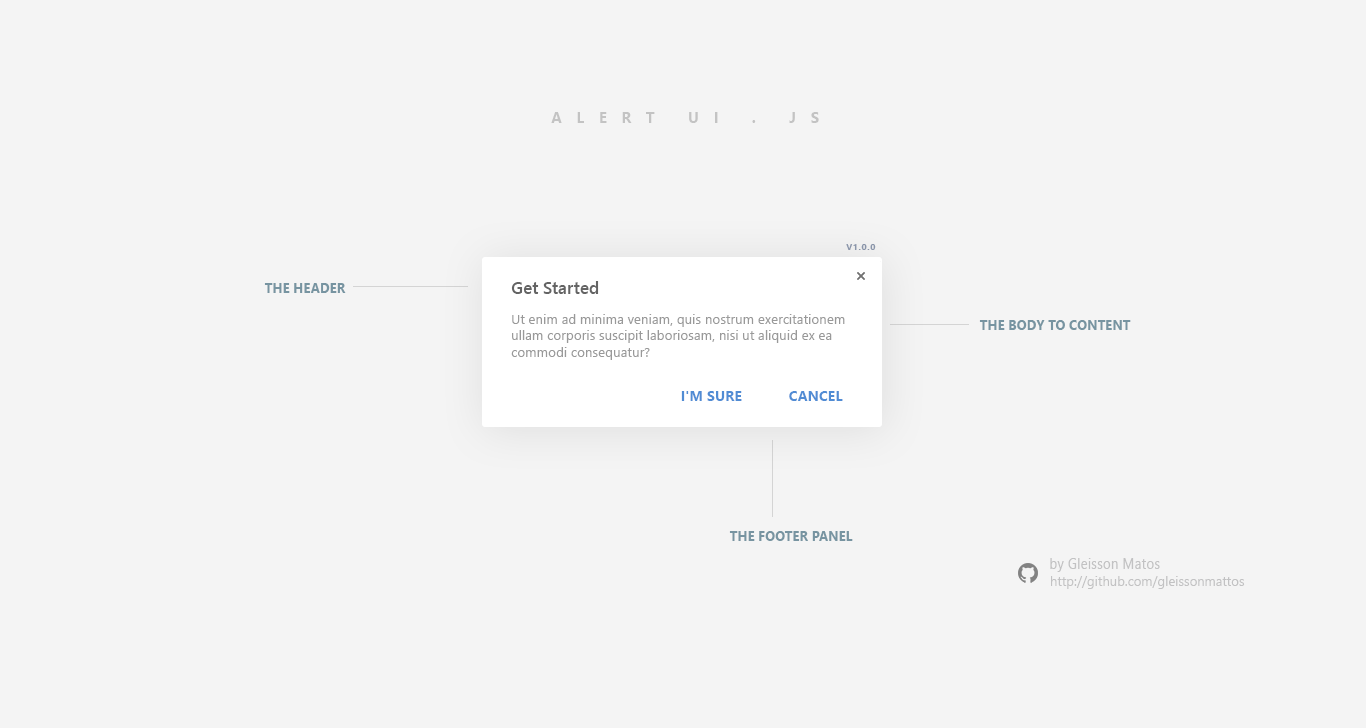
<style>
.page{position:relative;width:1366px;height:728px;background:#f4f4f4}
.page>*{position:absolute;margin:0}
.t1{font:16.4px "SegoeUI-Bold";letter-spacing:0.96em;color:#c2c2c3;text-transform:uppercase;scale:0.92 1}
.t2{font:8.3px "SegoeUI-Bold";letter-spacing:0.06em;color:#8a95aa;text-transform:uppercase;scale:1.08 1}
.t3{font:17.1px "SegoeUI-Semibold";color:#646464}
.t4{font:13.2px "SegoeUI-Bold";color:#7794a1;text-transform:uppercase}
.t5{font:13.4px "SegoeUI";color:#999999}
.t6{font:14.2px "SegoeUI-Bold";color:#518cd4;text-transform:uppercase}
.t7{font:14.6px "SegoeUI";letter-spacing:0.01em;color:#c2c2c3;scale:0.92 1}
.t8{font:13.8px "SegoeUI";letter-spacing:0.01em;color:#c2c2c3;scale:0.92 1}
</style>
<div class="page">
<p class="t1" style="left:551px;top:112px;width:268px;height:11px">alert ui . js</p>
<p class="t2" style="left:846px;top:244px;width:30px;height:6px">V1.0.0</p>
<p class="t3" style="left:511px;top:281px;width:88px;height:13px">Get Started</p>
<p class="t4" style="left:264px;top:283px;width:82px;height:10px">The HEADER</p>
<p class="t5" style="left:511px;top:314px;width:334px;height:46px">Ut enim ad minima veniam, quis nostrum exercitationem ullam corporis suscipit laboriosam, nisi ut aliquid ex ea commodi consequatur?</p>
<p class="t4" style="left:979px;top:320px;width:152px;height:10px">The Body to content</p>
<p class="t6" style="left:681px;top:391px;width:61px;height:10px">I'm sure</p>
<p class="t6" style="left:789px;top:391px;width:54px;height:10px">Cancel</p>
<p class="t4" style="left:729px;top:531px;width:124px;height:10px">The footer panel</p>
<p class="t7" style="left:1050px;top:558px;width:110px;height:14px">by Gleisson Matos</p>
<p class="t8" style="left:1051px;top:576px;width:194px;height:13px">http://github.com/gleissonmattos</p>
</div>
